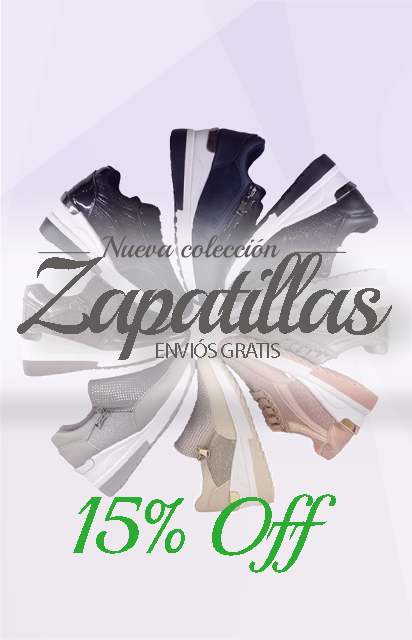
<style>
.page{position:relative;width:412px;height:640px}
.page>*{position:absolute;margin:0}
.t1{font:30px "Playball-Regular";color:#5f5d5c}
.t2{font:108.1px "Playball-Regular";letter-spacing:-0.05em;color:#5f5d5c}
.t3{font:22.2px "MyriadPro-Regular";letter-spacing:-0.05em;color:#5f5d5c;text-transform:uppercase}
.t4{font:79.5px "Playball-Regular";letter-spacing:-0.05em;color:#2cac32}
</style>
<div class="page">
<p class="t1" style="left:102px;top:235px;width:178px;height:23px">Nueva colección</p>
<p class="t2" style="left:17px;top:253px;width:375px;height:107px">Zapatillas</p>
<p class="t3" style="left:156px;top:339px;width:124px;height:19px">ENVIÓS GRATIS</p>
<p class="t4" style="left:73px;top:494px;width:263px;height:79px">15% Off</p>
</div>
